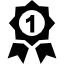
<style>
.page{position:relative;width:64px;height:64px;background:#ffffff}
.page>*{position:absolute;margin:0}
.t1{font:24px "Arial-BoldMT";letter-spacing:0.01em;color:#000101;font-weight:bold}
</style>
<div class="page">
<p class="t1" style="left:26px;top:15px;width:9px;height:18px">1</p>
</div>
